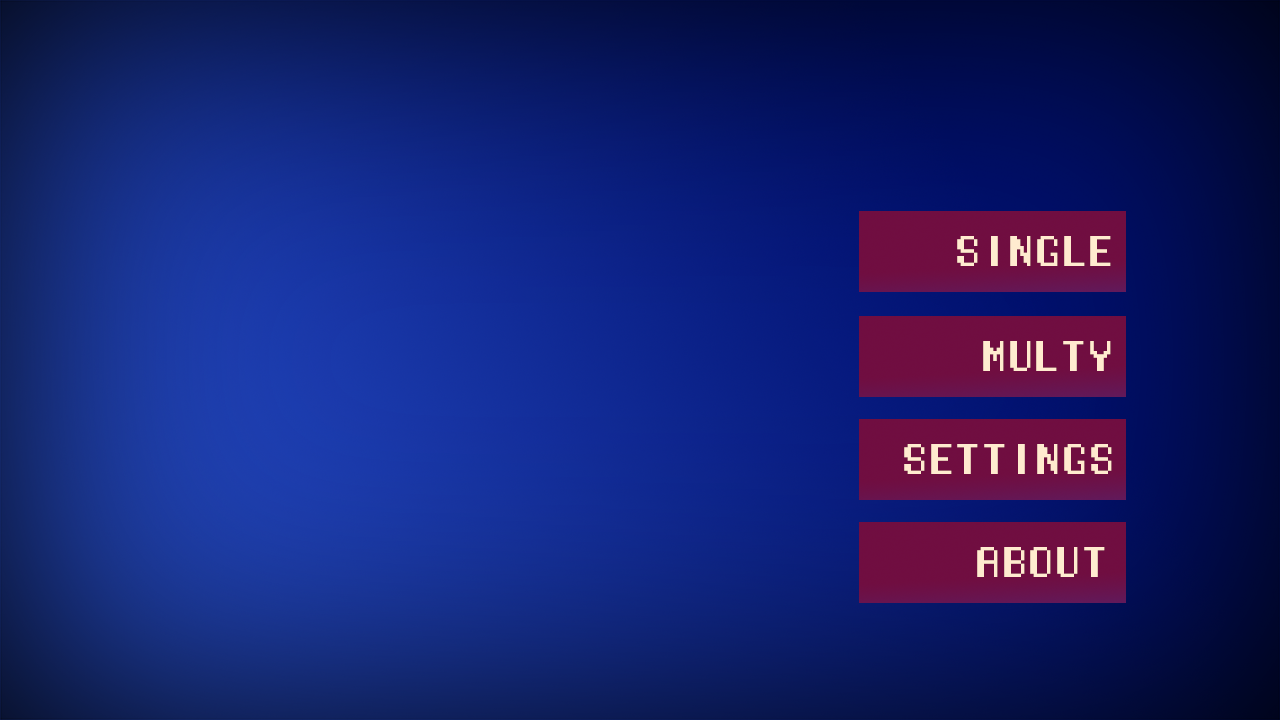
<style>
.page{position:relative;width:1280px;height:720px}
.page>*{position:absolute;margin:0}
.t1{font:40px "ManaspaceReg";color:#ffebcf}
</style>
<div class="page">
<p class="t1" style="left:957px;top:236px;width:154px;height:30px">SINGLE</p>
<p class="t1" style="left:983px;top:341px;width:128px;height:30px">MULTY</p>
<p class="t1" style="left:904px;top:444px;width:208px;height:30px">SETTINGS</p>
<p class="t1" style="left:977px;top:547px;width:128px;height:30px">ABOUT</p>
</div>
